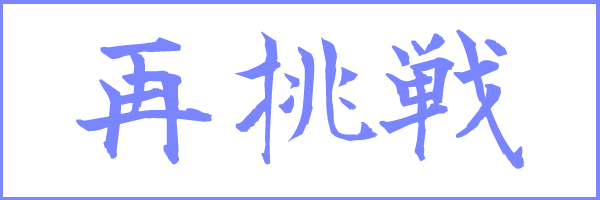
<style>
.page{position:relative;width:600px;height:200px;background:#ffffff}
.page>*{position:absolute;margin:0}
.t1{font:164.4px "AoyagiKouzanFontTOTF";letter-spacing:-0.1em;color:#7986ff;font-weight:bold}
</style>
<div class="page">
<p class="t1" style="left:76px;top:29px;width:448px;height:140px">再挑戦</p>
</div>
